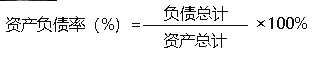
<style>
.page{position:relative;width:320px;height:57px;background:#ffffff}
.page>*{position:absolute;margin:0}
.t1{font:16px "MicrosoftYaHei";letter-spacing:-0.005em;color:#0d0d0d}
</style>
<div class="page">
<p class="t1" style="left:164px;top:5px;width:64px;height:16px">负债总计</p>
<p class="t1" style="left:6px;top:16px;width:134px;height:17px">资产负债率（%）=</p>
<p class="t1" style="left:257px;top:17px;width:50px;height:12px">×100%</p>
<p class="t1" style="left:164px;top:33px;width:63px;height:15px">资产总计</p>
</div>
